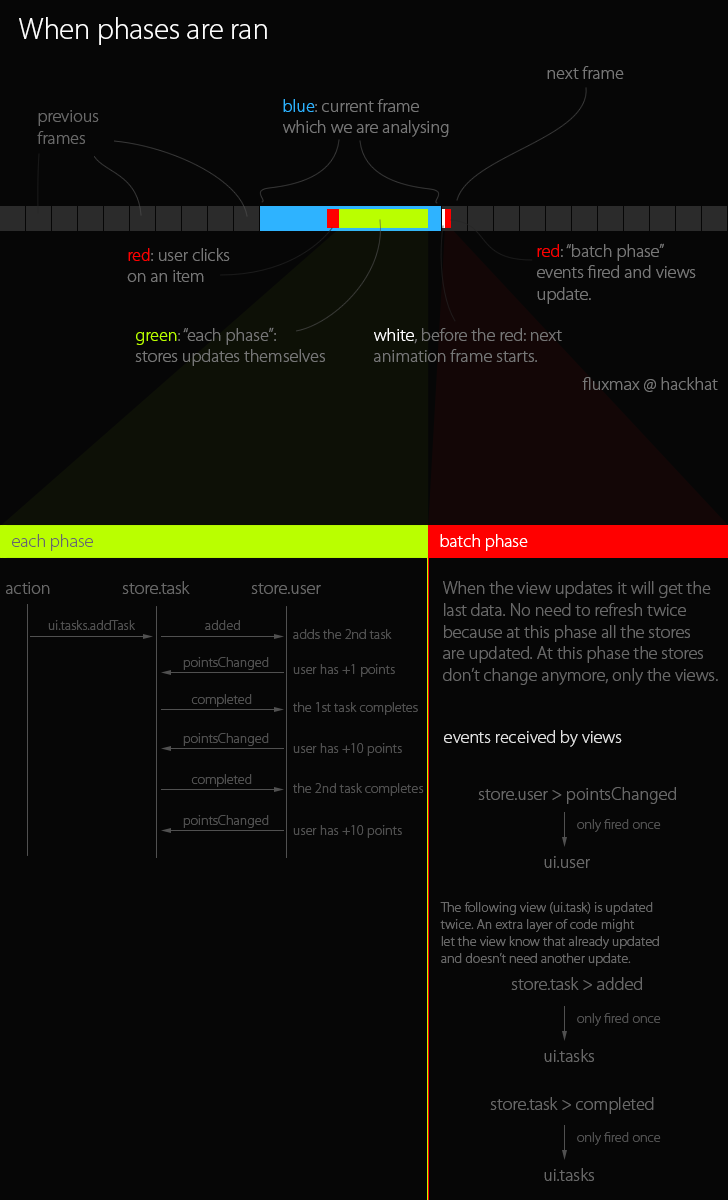
<style>
.page{position:relative;width:728px;height:1200px;background:#060606}
.page>*{position:absolute;margin:0}
.t1{font:30px "MyriadPro-Light";color:#fefefe}
.t2{font:18px "MyriadPro-Light";color:#767676}
.t3{font:18px "MyriadPro-Light";color:#2eb3ff}
.t4{font:18px "MyriadPro-Light";color:#686868}
.t5{font:18px "MyriadPro-Light";color:#ff0000}
.t6{font:18px "MyriadPro-Light";color:#baff00}
.t7{font:18px "MyriadPro-Light";color:#ffffff}
.t8{font:14px "MyriadPro-Light";color:#505050}
.t9{font:18px "MyriadPro-Light";color:#e1e1e1}
.t10{font:14px "MyriadPro-Light";color:#686868}
</style>
<div class="page">
<p class="t1" style="left:19px;top:17px;width:248px;height:28px">When phases are ran</p>
<p class="t2" style="left:547px;top:66px;width:77px;height:13px">next frame</p>
<p class="t2" style="left:283px;top:99px;width:166px;height:38px"><span class="t3">blue</span>: current frame<br>which we are analysing</p>
<p class="t4" style="left:37px;top:110px;width:62px;height:34px">previous <br>frames</p>
<p class="t2" style="left:537px;top:243px;width:159px;height:61px"><span class="t5">red</span>: “batch phase” <br>events fired and views <br>update.</p>
<p class="t2" style="left:127px;top:248px;width:103px;height:34px"><span class="t5">red</span>: user clicks<br>on an item</p>
<p class="t2" style="left:135px;top:327px;width:190px;height:39px"><span class="t6">green</span>: “each phase”:<br>stores updates themselves</p>
<p class="t2" style="left:374px;top:328px;width:188px;height:34px"><span class="t7">white</span>, before the red: next <br>animation frame starts.</p>
<p class="t2" style="left:582px;top:377px;width:136px;height:15px">fluxmax @ hackhat</p>
<p class="t4" style="left:12px;top:534px;width:81px;height:17px">each phase</p>
<p class="t7" style="left:440px;top:534px;width:88px;height:17px">batch phase</p>
<p class="t4" style="left:6px;top:582px;width:44px;height:12px">action</p>
<p class="t4" style="left:122px;top:581px;width:68px;height:13px">store.task</p>
<p class="t4" style="left:443px;top:581px;width:275px;height:104px">When the view updates it will get the<br>last data. No need to refresh twice<br>because at this phase all the stores<br>are updated. At this phase the stores<br>don’t change anymore, only the views.</p>
<p class="t4" style="left:251px;top:583px;width:70px;height:11px">store.user</p>
<p class="t8" style="left:48px;top:620px;width:87px;height:10px">ui.tasks.addTask</p>
<p class="t8" style="left:205px;top:620px;width:35px;height:10px">added</p>
<p class="t8" style="left:293px;top:629px;width:99px;height:10px">adds the 2nd task</p>
<p class="t8" style="left:183px;top:657px;width:86px;height:13px">pointsChanged</p>
<p class="t8" style="left:293px;top:664px;width:102px;height:13px">user has +1 points</p>
<p class="t8" style="left:191px;top:694px;width:61px;height:13px">completed</p>
<p class="t8" style="left:293px;top:702px;width:125px;height:13px">the 1st task completes</p>
<p class="t8" style="left:183px;top:733px;width:86px;height:13px">pointsChanged</p>
<p class="t9" style="left:444px;top:730px;width:178px;height:17px">events received by views</p>
<p class="t8" style="left:293px;top:743px;width:109px;height:13px">user has +10 points</p>
<p class="t8" style="left:191px;top:774px;width:61px;height:13px">completed</p>
<p class="t8" style="left:293px;top:783px;width:131px;height:13px">the 2nd task completes</p>
<p class="t4" style="left:478px;top:787px;width:198px;height:17px">store.user &gt; pointsChanged</p>
<p class="t8" style="left:183px;top:815px;width:86px;height:13px">pointsChanged</p>
<p class="t8" style="left:577px;top:819px;width:84px;height:13px">only fired once</p>
<p class="t8" style="left:293px;top:825px;width:109px;height:13px">user has +10 points</p>
<p class="t4" style="left:544px;top:856px;width:46px;height:12px">ui.user</p>
<p class="t10" style="left:440px;top:902px;width:219px;height:64px">The following view (ui.task) is updated<br>twice. An extra layer of code might<br>let the view know that already updated<br>and doesn’t need another update.</p>
<p class="t4" style="left:511px;top:977px;width:131px;height:13px">store.task &gt; added</p>
<p class="t8" style="left:577px;top:1013px;width:84px;height:13px">only fired once</p>
<p class="t4" style="left:544px;top:1049px;width:50px;height:13px">ui.tasks</p>
<p class="t4" style="left:490px;top:1097px;width:164px;height:17px">store.task &gt; completed</p>
<p class="t8" style="left:577px;top:1132px;width:84px;height:13px">only fired once</p>
<p class="t4" style="left:544px;top:1168px;width:50px;height:13px">ui.tasks</p>
</div>
